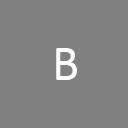
<style>
.page{position:relative;width:128px;height:128px;background:#808080}
.page>*{position:absolute;margin:0}
.t1{font:50px "Calibri";color:#feffff}
</style>
<div class="page">
<p class="t1" style="left:56px;top:48px;width:21px;height:32px">B</p>
</div>
